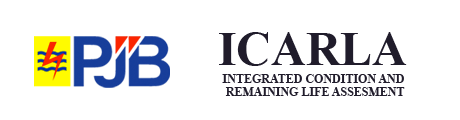
<style>
.page{position:relative;width:460px;height:120px;background:#ffffff}
.page>*{position:absolute;margin:0}
.t1{font:48px "TimesNewRomanPS-BoldMT";color:#201c2b}
.t2{font:12px/13.5px "TimesNewRomanPS-BoldMT";color:#201c2b}
</style>
<div class="page">
<p class="t1" style="left:219px;top:32px;width:188px;height:34px">ICARLA</p>
<p class="t2" style="left:222px;top:74px;width:183px;height:22px;text-align:center">INTEGRATED CONDITION AND <br>REMAINING LIFE ASSESMENT</p>
</div>
